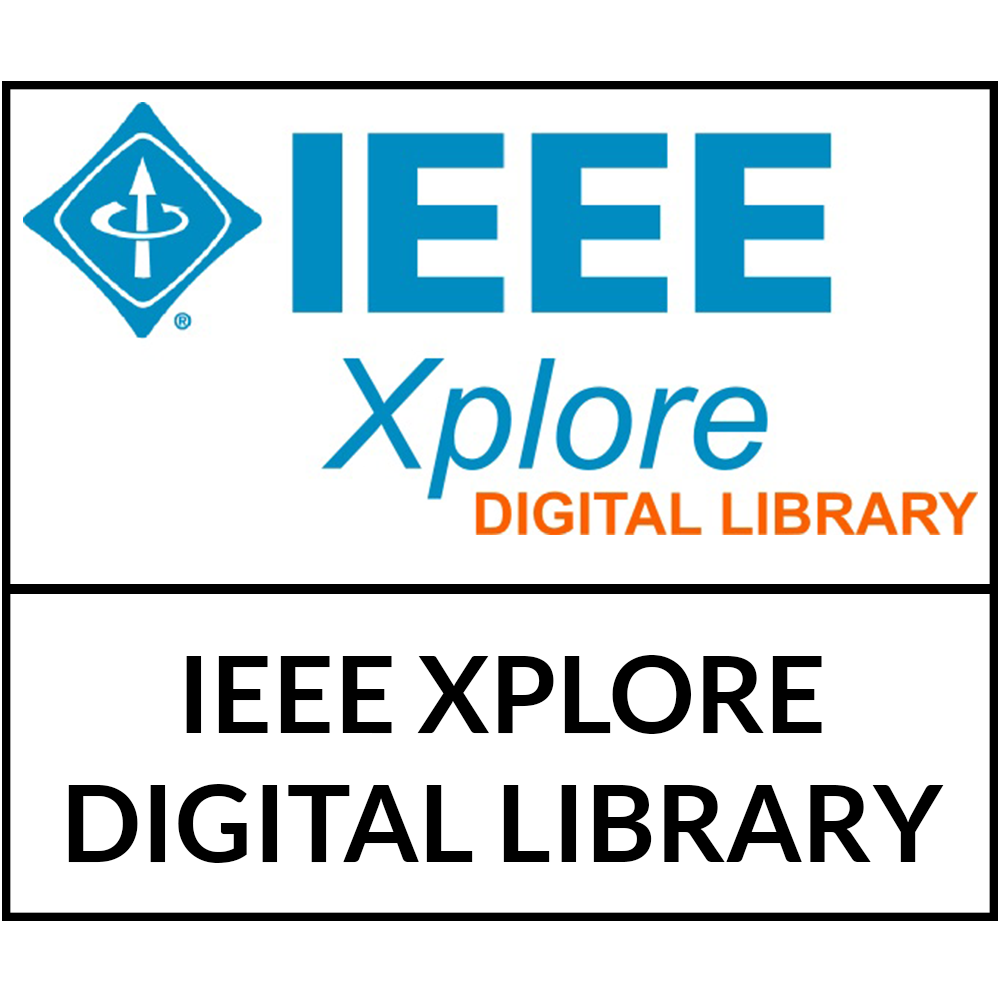
<style>
.page{position:relative;width:1000px;height:1000px;background:#ffffff}
.page>*{position:absolute;margin:0}
.t1{font:25.8px "Lato-Bold";letter-spacing:0.005em;color:#000000}
</style>
<div class="page">
<p class="t1" style="left:68px;top:655px;width:876px;height:208px;text-align:center">IEEE XPLORE<br>DIGITAL LIBRARY</p>
</div>
